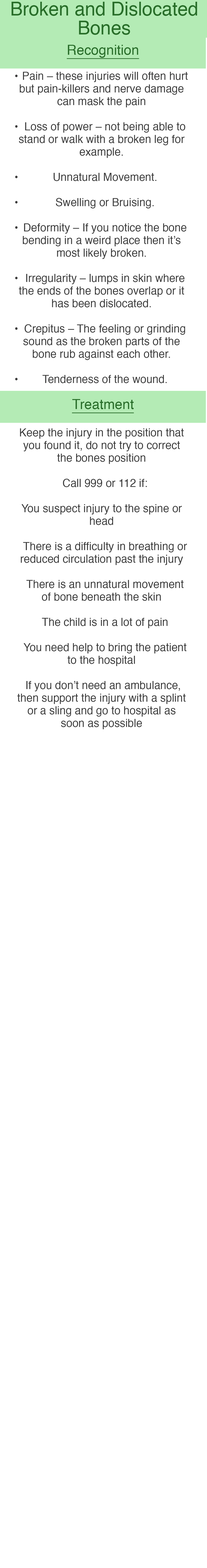
<style>
.page{position:relative;width:207px;height:1568px;background:#ffffff}
.page>*{position:absolute;margin:0}
.t1{font:19px "Helvetica";color:#286e29}
.t2{font:13.9px "Helvetica";color:#296e2a;text-decoration:underline}
.t3{font:11.1px/12.6px "Helvetica";color:#3d3d3d}
</style>
<div class="page">
<p class="t1" style="left:11px;top:2px;width:186px;height:33px;text-align:center">Broken and Dislocated Bones</p>
<p class="t2" style="left:67px;top:45px;width:72px;height:14px">Recognition</p>
<p class="t3" style="left:15px;top:72px;width:173px;height:311px;text-align:center">• Pain – these injuries will often hurt but pain-killers and nerve damage can mask the pain<br><br>• Loss of power – not being able to stand or walk with a broken leg for example.<br><br>• Unnatural Movement.<br><br>• Swelling or Bruising.<br><br>• Deformity – If you notice the bone bending in a weird place then it’s most likely broken.<br><br>• Irregularity – lumps in skin where the ends of the bones overlap or it has been dislocated.<br><br>• Crepitus – The feeling or grinding sound as the broken parts of the bone rub against each other.<br><br>• Tenderness of the wound.</p>
<p class="t2" style="left:72px;top:399px;width:62px;height:14px">Treatment</p>
<p class="t3" style="left:17px;top:428px;width:170px;height:301px;text-align:center">Keep the injury in the position that you found it, do not try to correct the bones position<br><br> Call 999 or 112 if:<br><br>You suspect injury to the spine or head<br><br> There is a difficulty in breathing or reduced circulation past the injury<br><br> There is an unnatural movement of bone beneath the skin<br><br> The child is in a lot of pain<br><br> You need help to bring the patient to the hospital<br><br> If you don’t need an ambulance, then support the injury with a splint or a sling and go to hospital as soon as possible</p>
</div>
